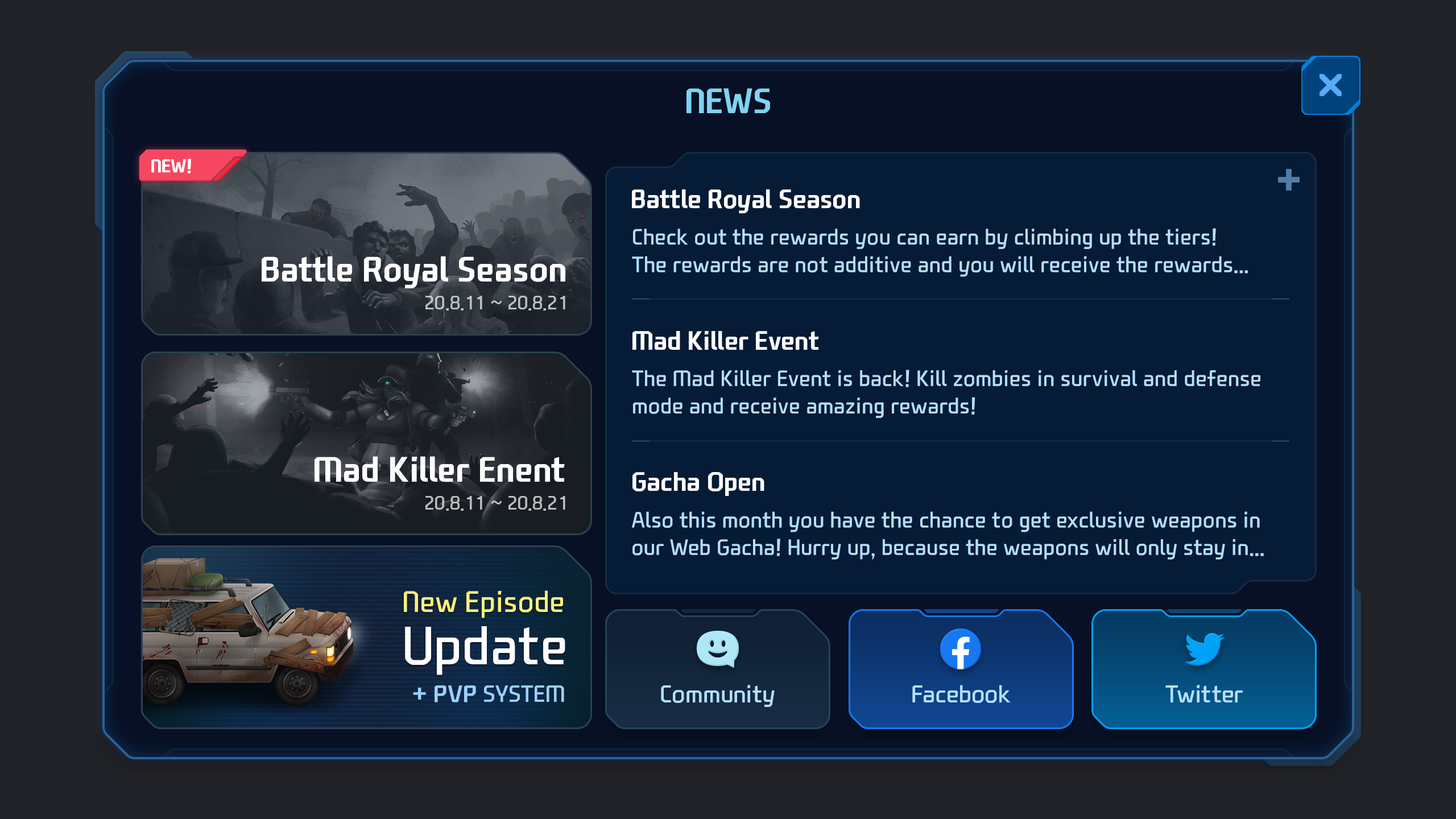
<style>
.page{position:relative;width:1456px;height:819px;background:#212227}
.page>*{position:absolute;margin:0}
.t1{font:34.1px "NEXONFootballGothicB";color:#7fd4f0;text-transform:uppercase}
.t2{font:17.9px "NEXONFootballGothicB";color:#ffffff;text-transform:uppercase}
.t3{font:25.5px "NEXONFootballGothicB";color:#ffffff}
.t4{font:21.6px/27.5px "NEXONFootballGothicL";color:#b4dffe}
.t5{font:34.1px "NEXONFootballGothicB";color:#ffffff}
.t6{font:18.8px "NEXONFootballGothicL";color:#bdbebf}
.t7{font:18.8px "NEXONFootballGothicL";color:#bbbbbc}
.t8{font:29px "NEXONFootballGothicL";color:#fff17a}
.t9{font:52.3px "NEXONFootballGothicL";color:#ffffff}
.t10{font:22.7px "NEXONFootballGothicL";color:#9bd1ff}
.t11{font:22.7px "NEXONFootballGothicL";color:#9bd1ff;font-weight:bold}
.t12{font:23.6px "NEXONFootballGothicL";color:#b4dffe}
</style>
<div class="page">
<p class="t1" style="left:686px;top:88px;width:84px;height:25px">News</p>
<p class="t2" style="left:151px;top:159px;width:40px;height:14px">New!</p>
<p class="t3" style="left:632px;top:189px;width:228px;height:24px">Battle Royal Season</p>
<p class="t4" style="left:632px;top:228px;width:616px;height:49px">Check out the rewards you can earn by climbing up the tiers!<br>The rewards are not additive and you will receive the rewards...</p>
<p class="t5" style="left:262px;top:256px;width:303px;height:32px">Battle Royal Season</p>
<p class="t6" style="left:425px;top:296px;width:140px;height:15px">20.8.11 ~ 20.8.21</p>
<p class="t3" style="left:632px;top:331px;width:187px;height:19px">Mad Killer Event</p>
<p class="t4" style="left:632px;top:370px;width:628px;height:48px">The Mad Killer Event is back! Kill zombies in survival and defense <br>mode and receive amazing rewards!</p>
<p class="t5" style="left:315px;top:456px;width:250px;height:26px">Mad Killer Enent</p>
<p class="t3" style="left:632px;top:472px;width:132px;height:24px">Gacha Open</p>
<p class="t7" style="left:425px;top:496px;width:140px;height:15px">20.8.11 ~ 20.8.21</p>
<p class="t4" style="left:632px;top:511px;width:632px;height:49px">Also this month you have the chance to get exclusive weapons in <br>our Web Gacha! Hurry up, because the weapons will only stay in...</p>
<p class="t8" style="left:404px;top:590px;width:159px;height:28px">New Episode</p>
<p class="t9" style="left:405px;top:626px;width:160px;height:49px">Update</p>
<p class="t10" style="left:413px;top:685px;width:151px;height:17px"><span class="t11">+ PVP</span> SYSTEM</p>
<p class="t12" style="left:661px;top:685px;width:114px;height:22px">Community</p>
<p class="t12" style="left:912px;top:685px;width:99px;height:18px">Facebook</p>
<p class="t12" style="left:1165px;top:685px;width:78px;height:18px">Twitter</p>
</div>
